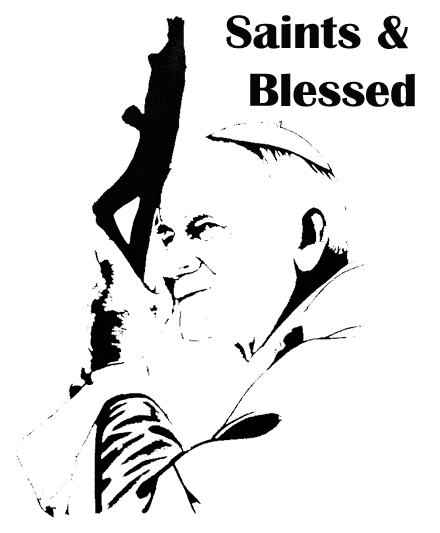
<style>
.page{position:relative;width:440px;height:533px;background:#ffffff}
.page>*{position:absolute;margin:0}
.t1{font:48px "BritannicBold";color:#060606;scale:1.06 1}
</style>
<div class="page">
<p class="t1" style="left:226px;top:15px;width:189px;height:92px;text-align:center">Saints &amp;<br>  Blessed</p>
</div>
